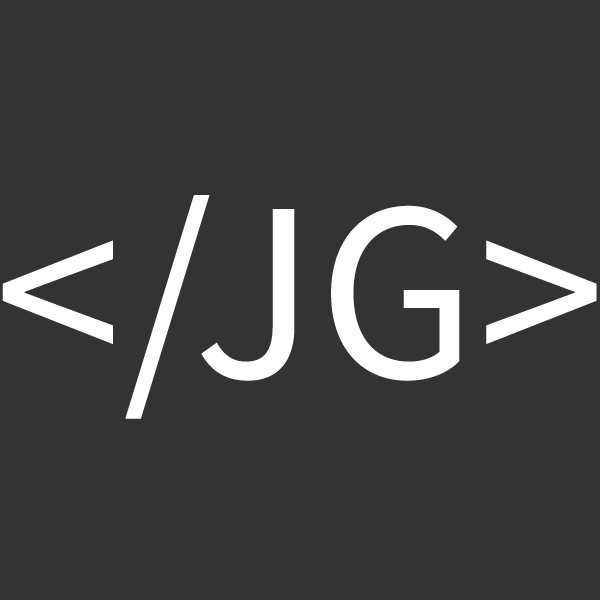
<style>
.page{position:relative;width:600px;height:600px;background:#333333}
.page>*{position:absolute;margin:0}
.t1{font:256.7px "SourceSansRoman-Regular";letter-spacing:0.005em;color:#ffffff}
</style>
<div class="page">
<p class="t1" style="left:2px;top:195px;width:595px;height:224px">&lt;/JG&gt;</p>
</div>
